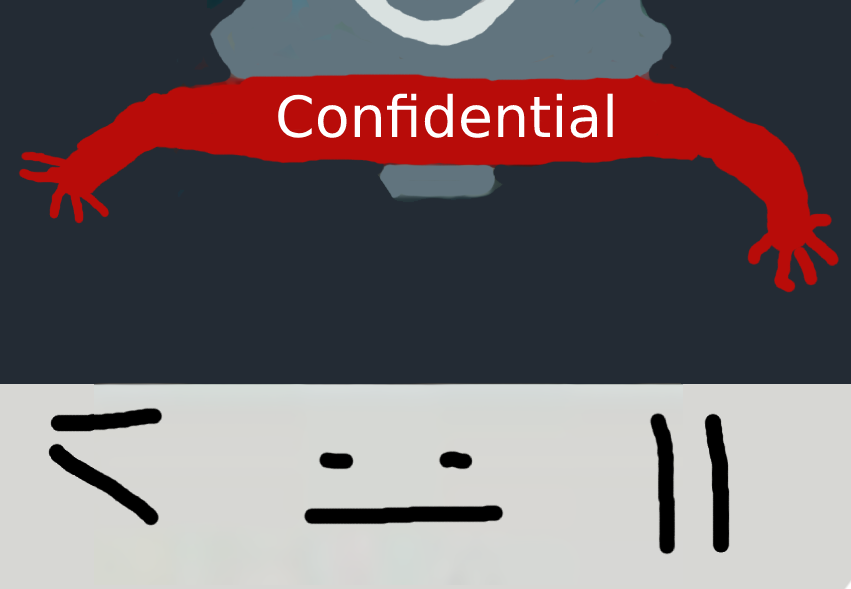
<style>
.page{position:relative;width:851px;height:589px;background:#232b34}
.page>*{position:absolute;margin:0}
.t1{font:57px "DejaVuSans";color:#ffffff}
</style>
<div class="page">
<p class="t1" style="left:278px;top:93px;width:335px;height:45px">Confidential</p>
</div>
